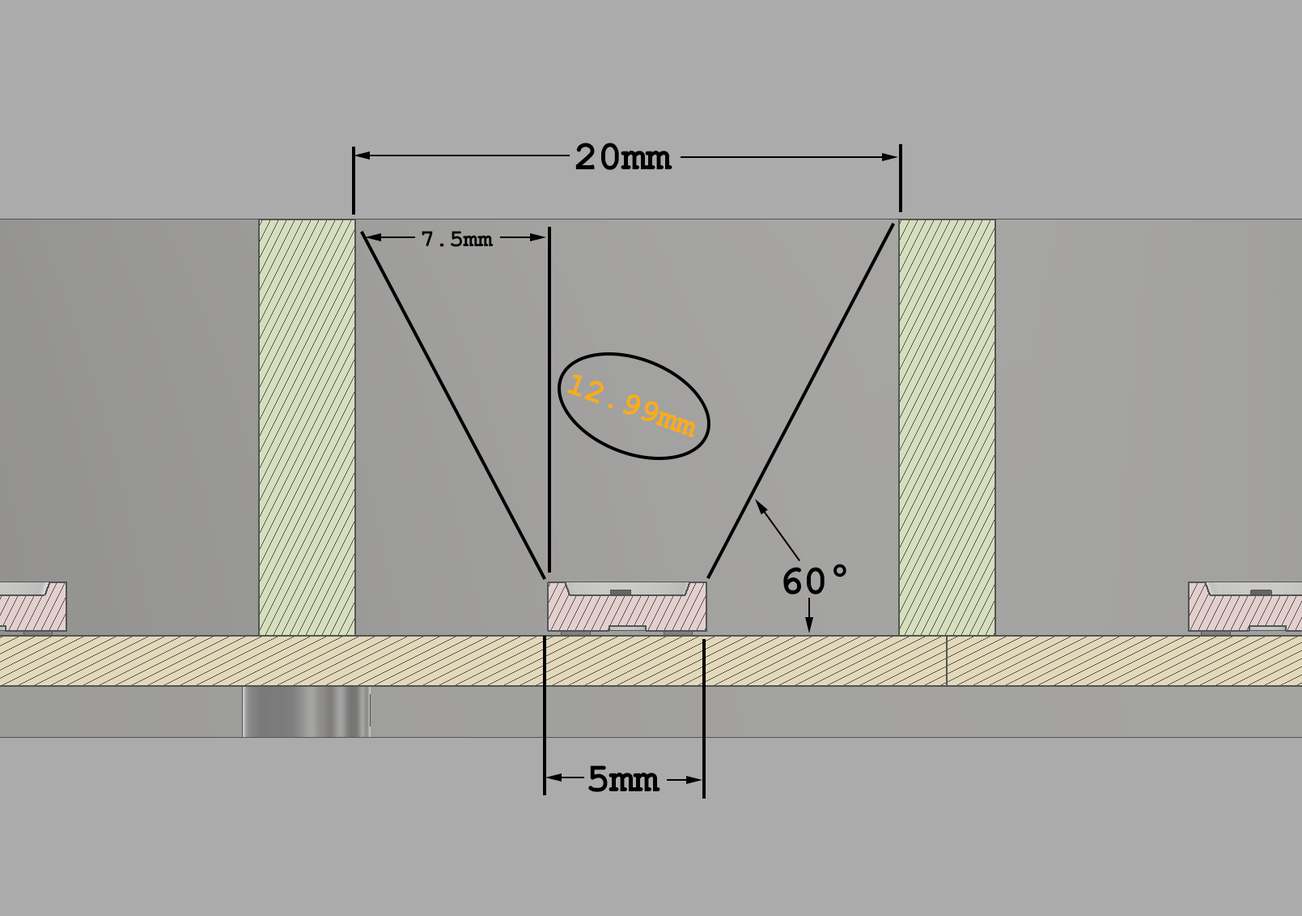
<style>
.page{position:relative;width:1302px;height:916px;background:#ababab}
.page>*{position:absolute;margin:0}
.t1{font:40.5px "CourierNewPS-BoldMT";color:#000000}
.t2{font:24.3px "CourierNewPS-BoldMT";color:#000000}
.t3{font:32.4px "CourierNewPS-BoldMT";color:#faac18}
</style>
<div class="page">
<p class="t1" style="left:576px;top:142px;width:97px;height:28px">20mm</p>
<p class="t2" style="left:422px;top:231px;width:72px;height:16px">7.5mm</p>
<p class="t3" style="left:567px;top:374px;width:128px;height:63px;rotate:20deg">12.99mm</p>
<p class="t1" style="left:784px;top:563px;width:63px;height:31px">60°</p>
<p class="t1" style="left:588px;top:765px;width:73px;height:27px">5mm</p>
</div>
